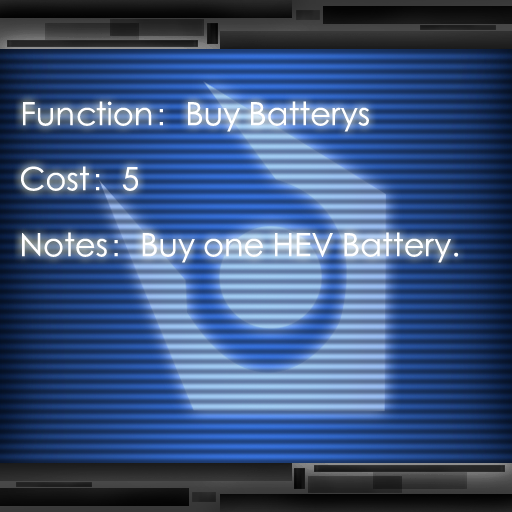
<style>
.page{position:relative;width:512px;height:512px}
.page>*{position:absolute;margin:0}
.t1{font:32px "STXihei";color:#ffffff}
</style>
<div class="page">
<p class="t1" style="left:23px;top:101px;width:346px;height:31px">Function：Buy Batterys</p>
<p class="t1" style="left:21px;top:166px;width:117px;height:25px">Cost：5</p>
<p class="t1" style="left:22px;top:232px;width:437px;height:31px">Notes：Buy one HEV Battery.</p>
</div>
